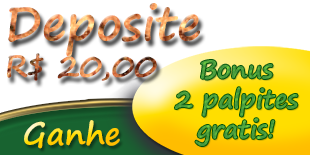
<style>
.page{position:relative;width:310px;height:155px;background:#ffffff}
.page>*{position:absolute;margin:0}
.t1{font:46.7px "SegoePrint-Bold"}
.t2{font:31.1px "SegoePrint-Bold"}
.t3{font:24.9px "SegoePrint-Bold";color:#4c9f3e}
</style>
<div class="page">
<p class="t1" style="left:7px;top:3px;width:193px;height:78px">Deposite<span class="t2"><br>R$ 20,00</span></p>
<p class="t3" style="left:175px;top:60px;width:123px;height:86px;text-align:center">Bonus<br>2 palpites<br>gratis!</p>
<p class="t2" style="left:24px;top:120px;width:96px;height:29px">Ganhe</p>
</div>
